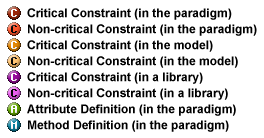
<style>
.page{position:relative;width:264px;height:138px;background:#ffffff}
.page>*{position:absolute;margin:0}
.t1{font:12px/16px "Arial-BoldMT";color:#000000}
</style>
<div class="page">
<p class="t1" style="left:27px;top:8px;width:230px;height:124px">Critical Constraint (in the paradigm)<br>Non-critical Constraint (in the paradigm)<br>Critical Constraint (in the model)<br>Non-critical Constraint (in the model)<br>Critical Constraint (in a library)<br>Non-critical Constraint (in a library)<br>Attribute Definition (in the paradigm)<br>Method Definition (in the paradigm)</p>
</div>
